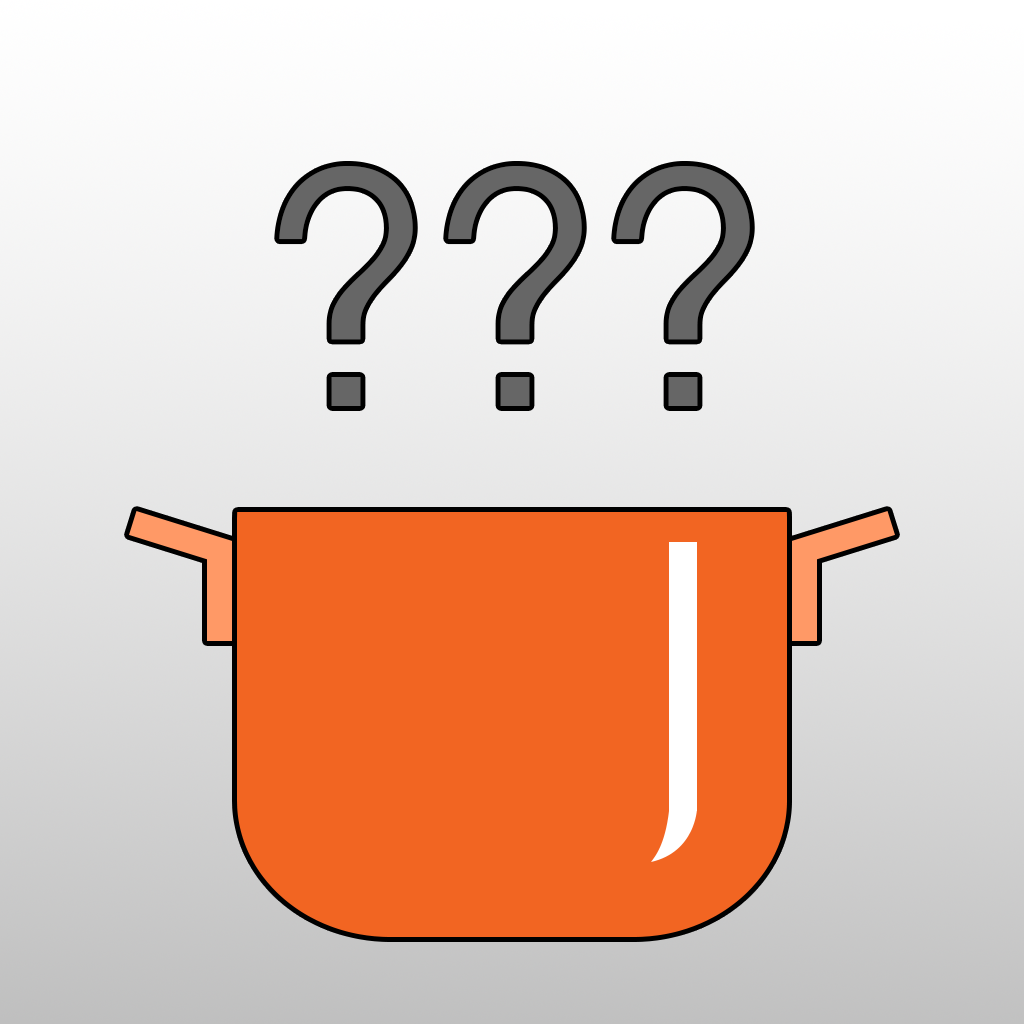
<style>
.page{position:relative;width:1024px;height:1024px;background:#f26522}
.page>*{position:absolute;margin:0}
.t1{font:333.3px "MyanmarSangamMN";color:#666666}
</style>
<div class="page">
<p class="t1" style="left:279px;top:166px;width:471px;height:240px">???</p>
</div>
